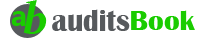
<style>
.page{position:relative;width:200px;height:50px;background:#ffffff}
.page>*{position:absolute;margin:0}
.t1{font:45px "Constantia-BoldItalic";color:#1acc00}
.t2{font:30px "NirmalaUI-Bold";color:#1acc00}
.t3{font:31.7px "BritannicBold";color:#575a5d;scale:0.91 1}
.t4{font:28px "BritannicBold";color:#1acc00;scale:1.04 1}
</style>
<div class="page">
<p class="t1" style="left:23px;top:0px;width:24px;height:34px">b</p>
<p class="t2" style="left:11px;top:11px;width:15px;height:15px">aB</p>
<p class="t3" style="left:52px;top:9px;width:78px;height:22px">audits</p>
<p class="t4" style="left:131px;top:10px;width:64px;height:20px">Book</p>
</div>
